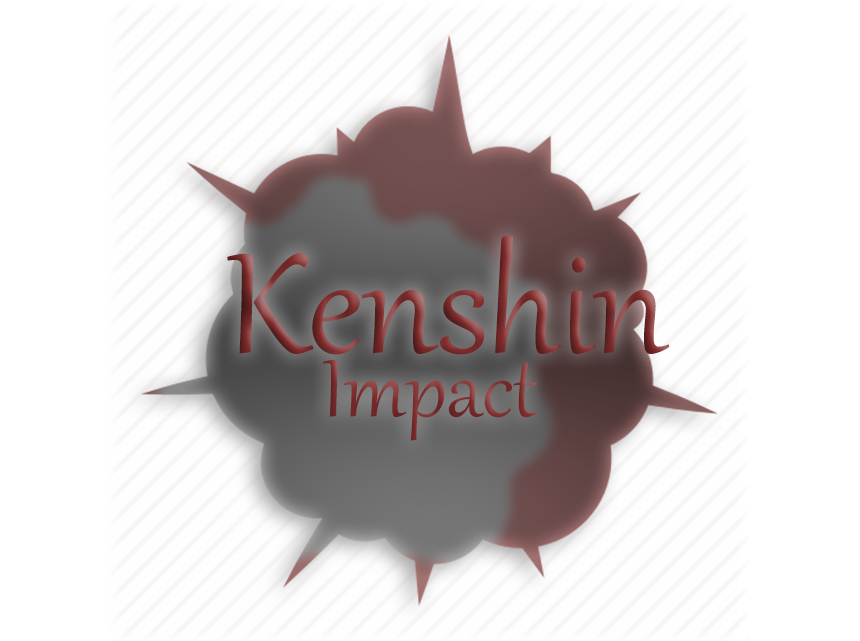
<style>
.page{position:relative;width:860px;height:641px;background:#ffffff}
.page>*{position:absolute;margin:0}
.t1{font:175px "Gabriola"}
.t2{font:100px "Gabriola"}
</style>
<div class="page">
<p class="t1" style="left:227px;top:235px;width:443px;height:120px">Kenshin</p>
<p class="t2" style="left:322px;top:359px;width:216px;height:82px">Impact</p>
</div>
